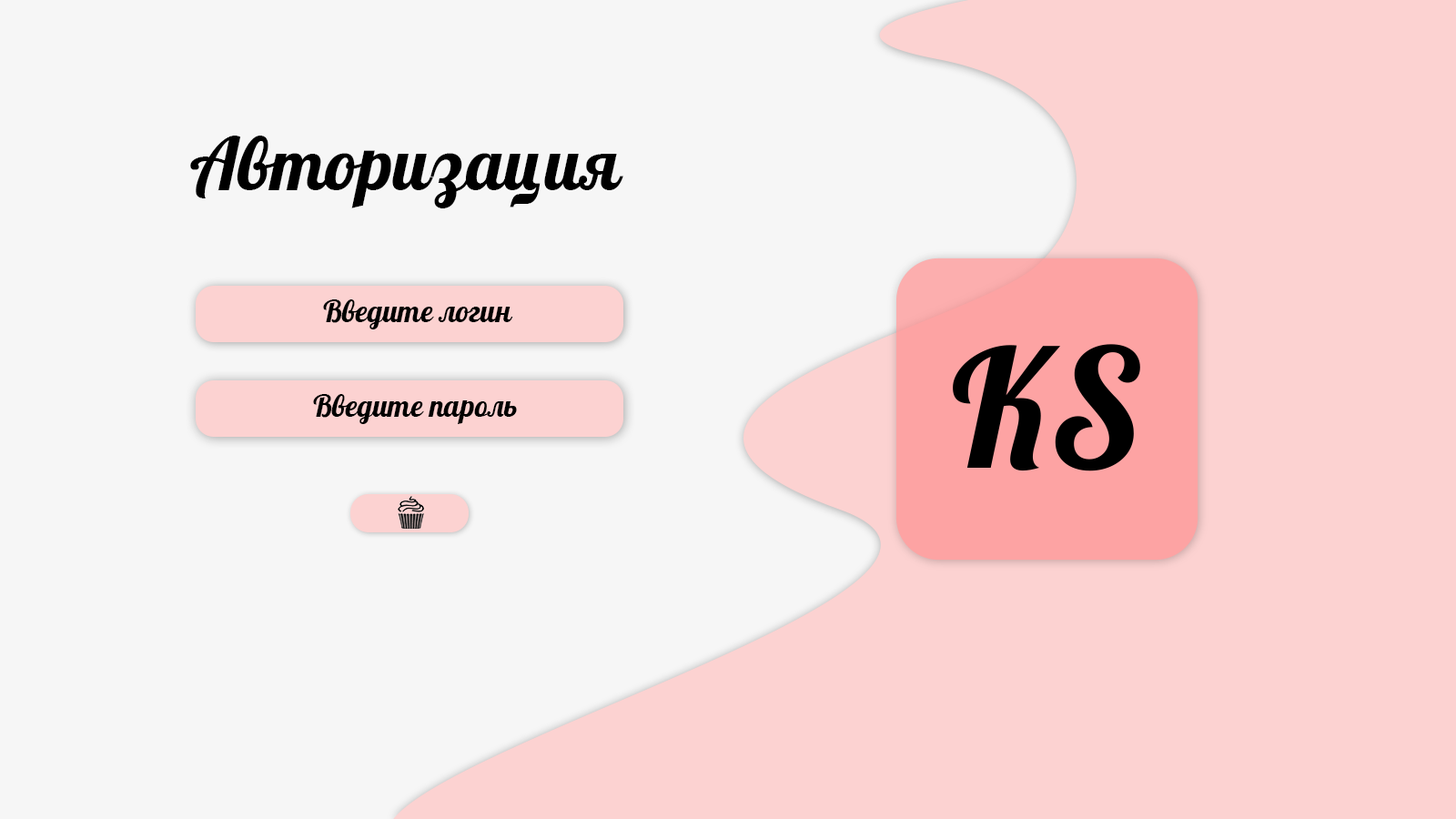
<style>
.page{position:relative;width:1456px;height:819px;background:#f6f6f6}
.page>*{position:absolute;margin:0}
.t1{font:73.2px "Pattaya-Regular";color:#000000}
.t2{font:30.3px "Pattaya-Regular";color:#000000}
</style>
<div class="page">
<p class="t1" style="left:190px;top:136px;width:433px;height:72px">Авторизация</p>
<p class="t2" style="left:323px;top:299px;width:190px;height:30px">Введите логин</p>
<p class="t2" style="left:313px;top:394px;width:204px;height:30px">Введите пароль</p>
</div>
